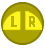
<style>
.page{position:relative;width:46px;height:48px;background:#ffffff}
.page>*{position:absolute;margin:0}
.t1{font:12px "Splatoon2";color:#b7b000}
</style>
<div class="page">
<p class="t1" style="left:12px;top:16px;width:5px;height:11px">L</p>
<p class="t1" style="left:29px;top:16px;width:6px;height:11px">R</p>
</div>
